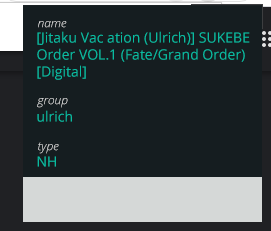
<style>
.page{position:relative;width:271px;height:231px;background:#151d20}
.page>*{position:absolute;margin:0}
.t1{font:12px "OpenSansLight-Italic"}
.t2{font:14px/17px "OpenSans";color:#09bba1}
.t3{font:14px "OpenSans";color:#09bba1}
</style>
<div class="page">
<p class="t1" style="left:38px;top:21px;width:29px;height:7px">name</p>
<p class="t2" style="left:37px;top:31px;width:213px;height:49px">[Jitaku Vac ation (Ulrich)] SUKEBE Order VOL.1 (Fate/Grand Order) [Digital]</p>
<p class="t1" style="left:37px;top:98px;width:31px;height:10px">group</p>
<p class="t3" style="left:37px;top:110px;width:35px;height:12px">ulrich</p>
<p class="t1" style="left:38px;top:142px;width:21px;height:12px">type</p>
<p class="t3" style="left:37px;top:156px;width:19px;height:11px">NH</p>
</div>
